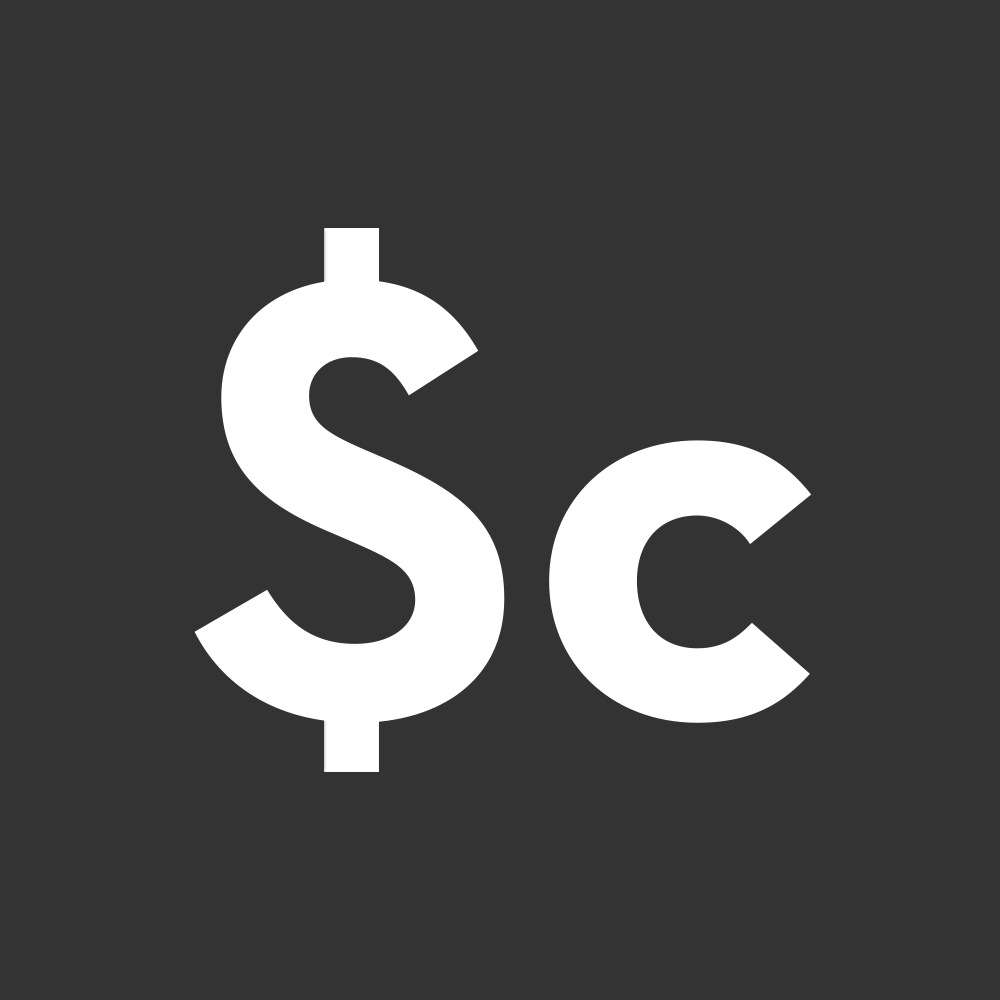
<style>
.page{position:relative;width:1000px;height:1000px;background:#333333}
.page>*{position:absolute;margin:0}
.t1{font:635.7px "NeutraText-Bold";letter-spacing:-0.005em;color:#ffffff}
</style>
<div class="page">
<p class="t1" style="left:194px;top:279px;width:618px;height:444px">Sc</p>
</div>
